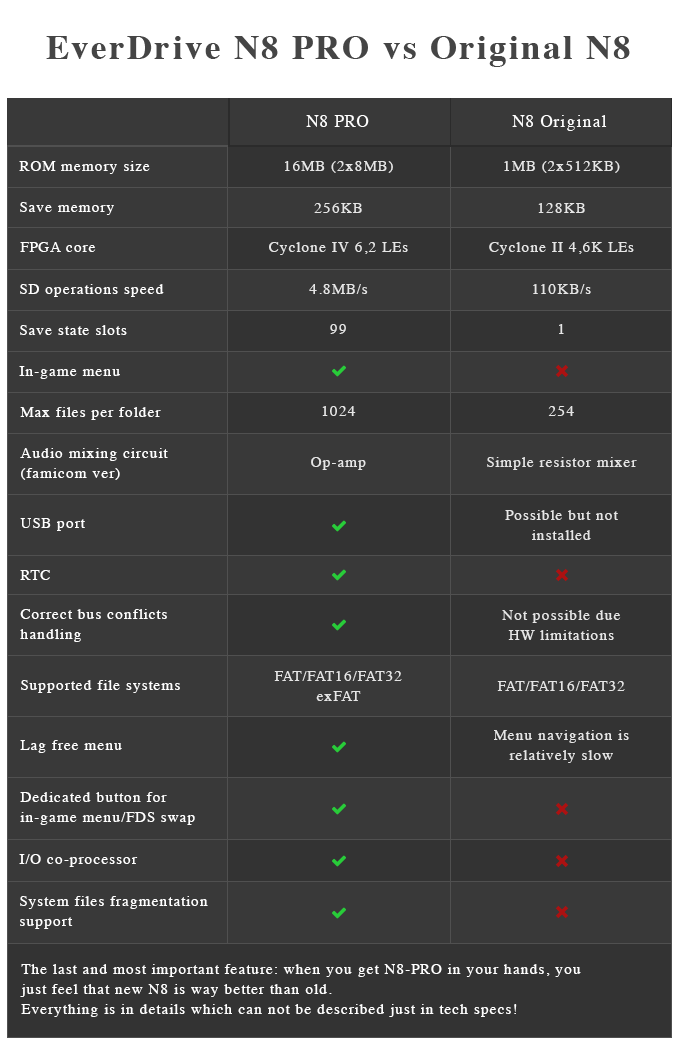
<style>
.page{position:relative;width:680px;height:1045px;background:#393939}
.page>*{position:absolute;margin:0}
.t1{font:35px "Times-Bold";letter-spacing:0.06em;color:#454545}
.t2{font:17px "Times-Roman";letter-spacing:0.06em;color:#ffffff}
.t3{font:15px "Times-Roman";letter-spacing:0.06em;color:#ffffff}
.t4{font:15px "Times-Roman";letter-spacing:0.06em;color:#e6e6e6}
.t5{font:15px/20px "Times-Roman";letter-spacing:0.06em;color:#ffffff}
.t6{font:15px/20px "Times-Roman";letter-spacing:0.06em;color:#e6e6e6}
</style>
<div class="page">
<p class="t1" style="left:46px;top:36px;width:584px;height:31px">EverDrive N8 PRO vs Original N8</p>
<p class="t2" style="left:306px;top:115px;width:63px;height:12px">N8 PRO</p>
<p class="t2" style="left:512px;top:115px;width:95px;height:16px">N8 Original</p>
<p class="t3" style="left:19px;top:161px;width:131px;height:13px">ROM memory size</p>
<p class="t4" style="left:285px;top:161px;width:108px;height:12px">16MB (2x8MB)</p>
<p class="t4" style="left:504px;top:161px;width:116px;height:12px">1MB (2x512KB)</p>
<p class="t3" style="left:20px;top:202px;width:94px;height:13px">Save memory</p>
<p class="t4" style="left:314px;top:203px;width:48px;height:10px">256KB</p>
<p class="t4" style="left:538px;top:203px;width:47px;height:10px">128KB</p>
<p class="t3" style="left:20px;top:242px;width:76px;height:10px">FPGA core</p>
<p class="t4" style="left:269px;top:242px;width:139px;height:13px">Cyclone IV 6,2 LEs</p>
<p class="t4" style="left:489px;top:242px;width:145px;height:13px">Cyclone II 4,6K LEs</p>
<p class="t3" style="left:20px;top:284px;width:144px;height:13px">SD operations speed</p>
<p class="t4" style="left:309px;top:284px;width:59px;height:10px">4.8MB/s</p>
<p class="t4" style="left:533px;top:284px;width:58px;height:10px">110KB/s</p>
<p class="t3" style="left:20px;top:325px;width:107px;height:10px">Save state slots</p>
<p class="t4" style="left:330px;top:324px;width:16px;height:10px">99</p>
<p class="t4" style="left:559px;top:324px;width:5px;height:10px">1</p>
<p class="t3" style="left:19px;top:366px;width:101px;height:13px">In-game menu</p>
<p class="t3" style="left:20px;top:407px;width:141px;height:13px">Max files per folder</p>
<p class="t4" style="left:322px;top:406px;width:34px;height:10px">1024</p>
<p class="t4" style="left:548px;top:406px;width:26px;height:10px">254</p>
<p class="t5" style="left:20px;top:448px;width:148px;height:32px">Audio mixing circuit<br>(famicom ver)</p>
<p class="t4" style="left:311px;top:457px;width:55px;height:13px">Op-amp</p>
<p class="t4" style="left:487px;top:457px;width:150px;height:13px">Simple resistor mixer</p>
<p class="t6" style="left:505px;top:510px;width:113px;height:30px;text-align:center">Possible but not<br>installed</p>
<p class="t3" style="left:20px;top:518px;width:65px;height:13px">USB port</p>
<p class="t3" style="left:20px;top:570px;width:30px;height:10px">RTC</p>
<p class="t5" style="left:20px;top:609px;width:147px;height:33px">Correct bus conflicts<br>handling</p>
<p class="t6" style="left:502px;top:610px;width:119px;height:30px;text-align:center">Not possible due<br>HW limitations</p>
<p class="t6" style="left:274px;top:671px;width:128px;height:30px;text-align:center">FAT/FAT16/FAT32<br>exFAT</p>
<p class="t3" style="left:21px;top:680px;width:159px;height:13px">Supported file systems</p>
<p class="t4" style="left:497px;top:681px;width:128px;height:10px">FAT/FAT16/FAT32</p>
<p class="t6" style="left:494px;top:730px;width:135px;height:33px;text-align:center">Menu navigation is<br>relatively slow</p>
<p class="t3" style="left:20px;top:740px;width:102px;height:13px">Lag free menu</p>
<p class="t5" style="left:20px;top:792px;width:175px;height:33px">Dedicated button for<br>in-game menu/FDS swap</p>
<p class="t3" style="left:19px;top:854px;width:119px;height:13px">I/O co-processor</p>
<p class="t5" style="left:20px;top:896px;width:188px;height:33px">System files fragmentation<br>support</p>
<p class="t5" style="left:20px;top:964px;width:561px;height:53px">The last and most important feature: when you get N8-PRO in your hands, you<br>just feel that new N8 is way better than old.<br>Everything is in details which can not be described just in tech specs!</p>
</div>
